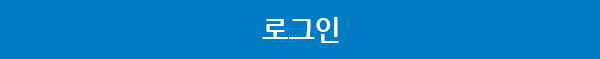
<style>
.page{position:relative;width:600px;height:59px;background:#007dc5}
.page>*{position:absolute;margin:0}
.t1{font:28px "NanumGothicBold";color:#ffffff}
</style>
<div class="page">
<p class="t1" style="left:262px;top:17px;width:77px;height:26px">로그인</p>
</div>
